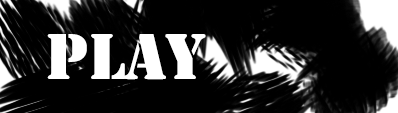
<style>
.page{position:relative;width:398px;height:113px;background:#000000}
.page>*{position:absolute;margin:0}
.t1{font:60px "StencilStd";color:#ffffff}
</style>
<div class="page">
<p class="t1" style="left:47px;top:34px;width:159px;height:46px">Play</p>
</div>
